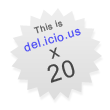
<style>
.page{position:relative;width:110px;height:110px;background:#ffffff}
.page>*{position:absolute;margin:0}
.t1{font:11.8px "ArialMT";letter-spacing:0.05em;color:#4b4bf5}
.t2{font:9px "ArialMT";letter-spacing:0.05em;color:#4b4bf5}
.t3{font:18px "ArialMT";letter-spacing:0.05em;color:#474747}
.t4{font:24px "ArialMT";letter-spacing:0.05em;color:#464646}
</style>
<div class="page">
<p class="t1" style="left:24px;top:20px;width:57px;height:32px;text-align:center;rotate:-17deg"><span class="t2">This is<br></span>del.icio.us</p>
<p class="t3" style="left:49px;top:47px;width:12px;height:12px;rotate:-19deg">x</p>
<p class="t4" style="left:47px;top:60px;width:28px;height:23px;rotate:-18deg">20</p>
</div>
